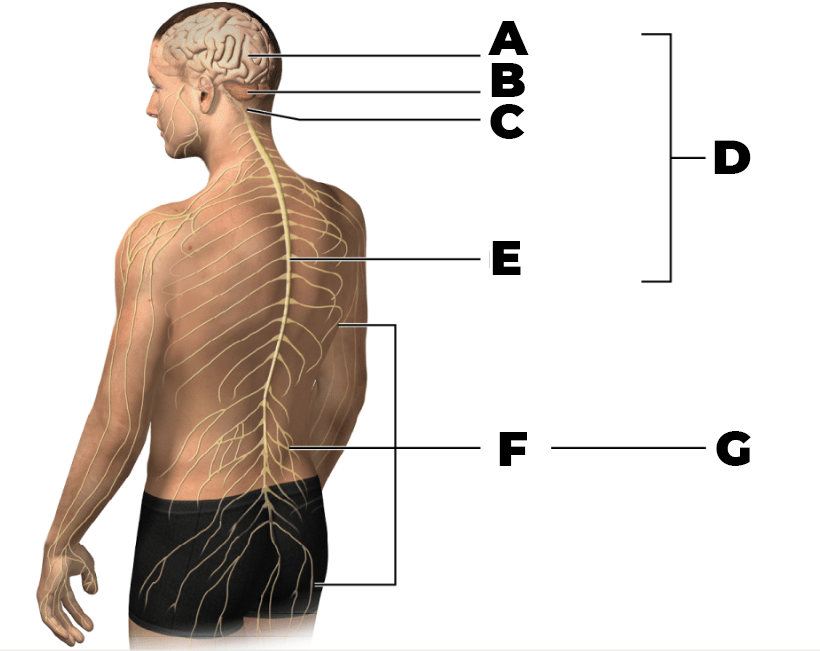
<style>
.page{position:relative;width:820px;height:651px;background:#ffffff}
.page>*{position:absolute;margin:0}
.t1{font:48px/14px "Montserrat-Black";color:#000000}
.t2{font:48px "Montserrat-Black";color:#000000}
</style>
<div class="page">
<p class="t1" style="left:488px;top:21px;width:41px;height:118px">A<br><br><br>B<br><br><br>C</p>
<p class="t2" style="left:714px;top:140px;width:37px;height:34px">D</p>
<p class="t2" style="left:492px;top:241px;width:29px;height:34px">E</p>
<p class="t2" style="left:499px;top:431px;width:252px;height:35px">F             G</p>
</div>
